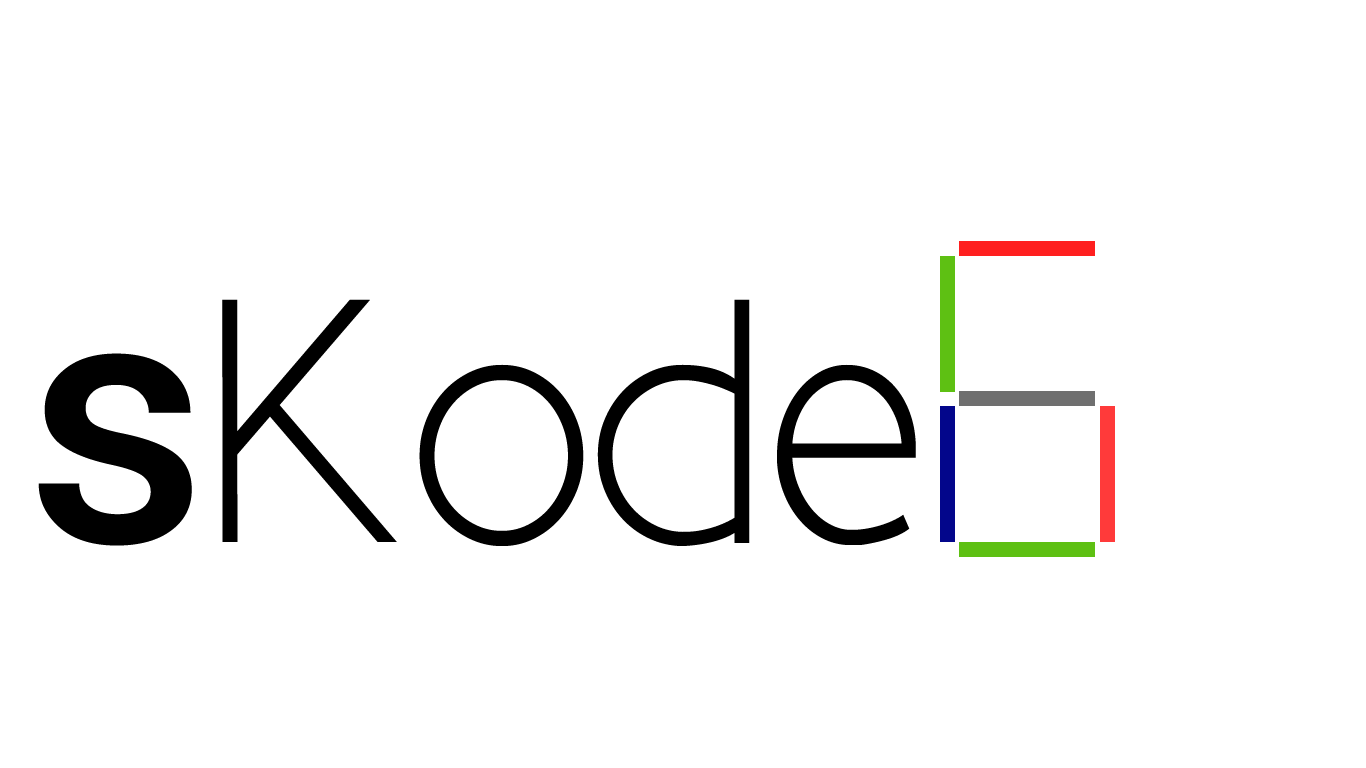
<style>
.page{position:relative;width:1366px;height:768px;background:#ffffff}
.page>*{position:absolute;margin:0}
.t1{font:350px "NewCicle-Fina";color:#000000}
.t2{font:350px "Roboto-Medium";color:#000000}
</style>
<div class="page">
<p class="t1" style="left:38px;top:299px;width:878px;height:247px"><span class="t2">s</span>Kode</p>
</div>
